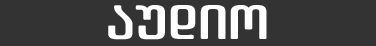
<style>
.page{position:relative;width:376px;height:46px;background:#333333}
.page>*{position:absolute;margin:0}
.t1{font:48.1px "ArchyEDT-Bold";color:#ffffff;scale:1.41 1}
</style>
<div class="page">
<p class="t1" style="left:108px;top:5px;width:159px;height:35px">აუდიო</p>
</div>
